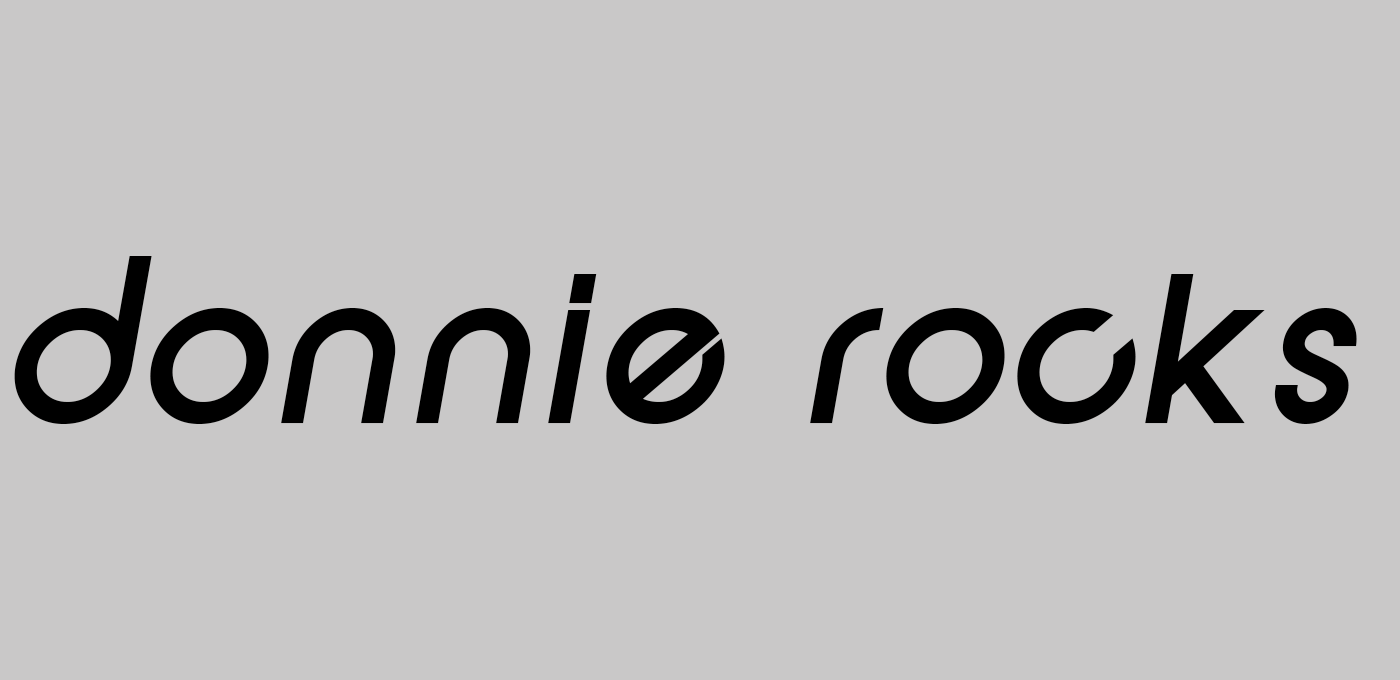
<style>
.page{position:relative;width:1400px;height:680px;background:#c9c8c8}
.page>*{position:absolute;margin:0}
.t1{font:200px "SFNewRepublicBoldItalic";color:#000000}
</style>
<div class="page">
<p class="t1" style="left:14px;top:256px;width:1343px;height:168px">donnie rocks</p>
</div>
